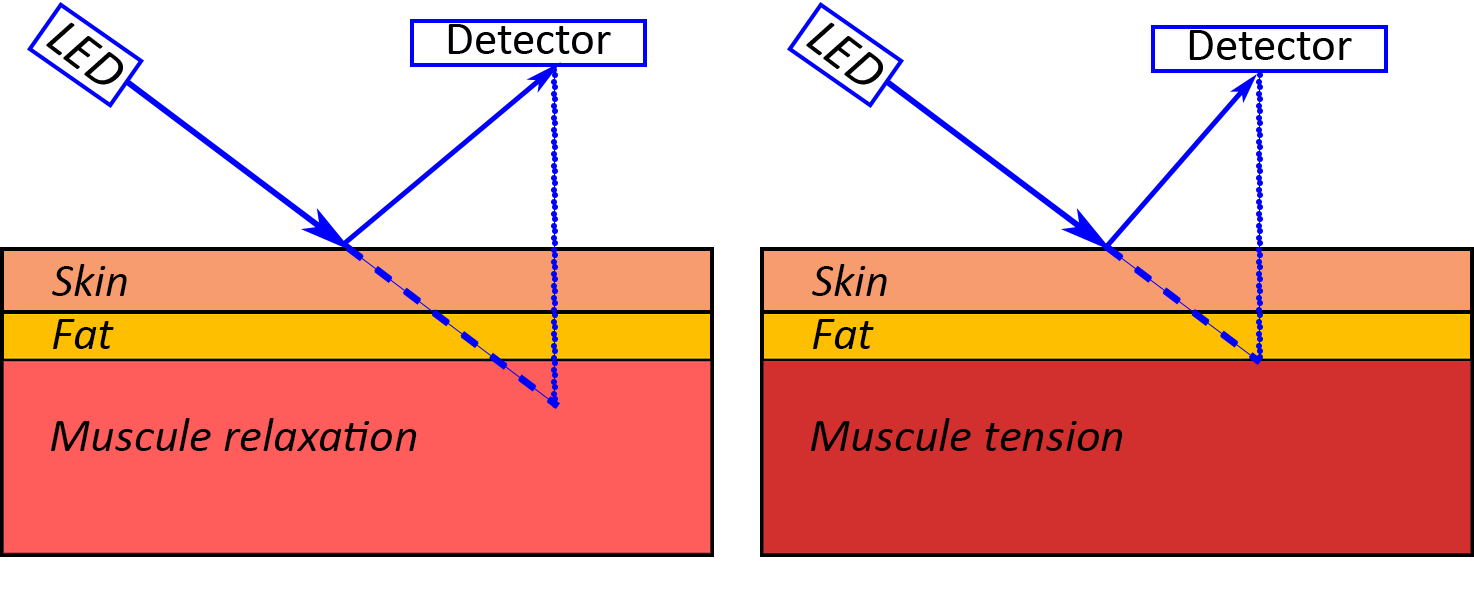
<style>
.page{position:relative;width:1474px;height:607px;background:#ffffff}
.page>*{position:absolute;margin:0}
.t1{font:53.3px "Calibri-Italic";color:#000000}
.t2{font:46.7px "Calibri";color:#000000}
.t3{font:46.7px "Calibri-Italic";color:#000000}
.t4{font:48px "Calibri-Italic";color:#000000}
</style>
<div class="page">
<p class="t1" style="left:46px;top:22px;width:77px;height:63px;rotate:37deg">LED</p>
<p class="t2" style="left:448px;top:24px;width:163px;height:30px">Detector</p>
<p class="t1" style="left:806px;top:22px;width:77px;height:63px;rotate:37deg">LED</p>
<p class="t2" style="left:1189px;top:30px;width:163px;height:30px">Detector</p>
<p class="t3" style="left:52px;top:264px;width:75px;height:32px">Skin</p>
<p class="t3" style="left:812px;top:264px;width:75px;height:32px">Skin</p>
<p class="t4" style="left:53px;top:319px;width:61px;height:30px">Fat</p>
<p class="t4" style="left:813px;top:319px;width:61px;height:30px">Fat</p>
<p class="t4" style="left:51px;top:418px;width:366px;height:33px">Muscule relaxation</p>
<p class="t4" style="left:811px;top:418px;width:312px;height:33px">Muscule tension</p>
</div>
